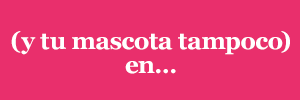
<style>
.page{position:relative;width:300px;height:100px;background:#e92f6c}
.page>*{position:absolute;margin:0}
.t1{font:24.1px/24.1px "Georgia-Bold";letter-spacing:-0.015em;color:#ffffff}
</style>
<div class="page">
<p class="t1" style="left:11px;top:31px;width:279px;height:43px;text-align:center">(y tu mascota tampoco)<br>en…</p>
</div>
